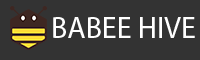
<style>
.page{position:relative;width:200px;height:60px;background:#333333}
.page>*{position:absolute;margin:0}
.t1{font:30px "MyriadPro-Regular";color:#ffffff}
</style>
<div class="page">
<p class="t1" style="left:53px;top:17px;width:142px;height:21px">BABEE HIVE</p>
</div>
